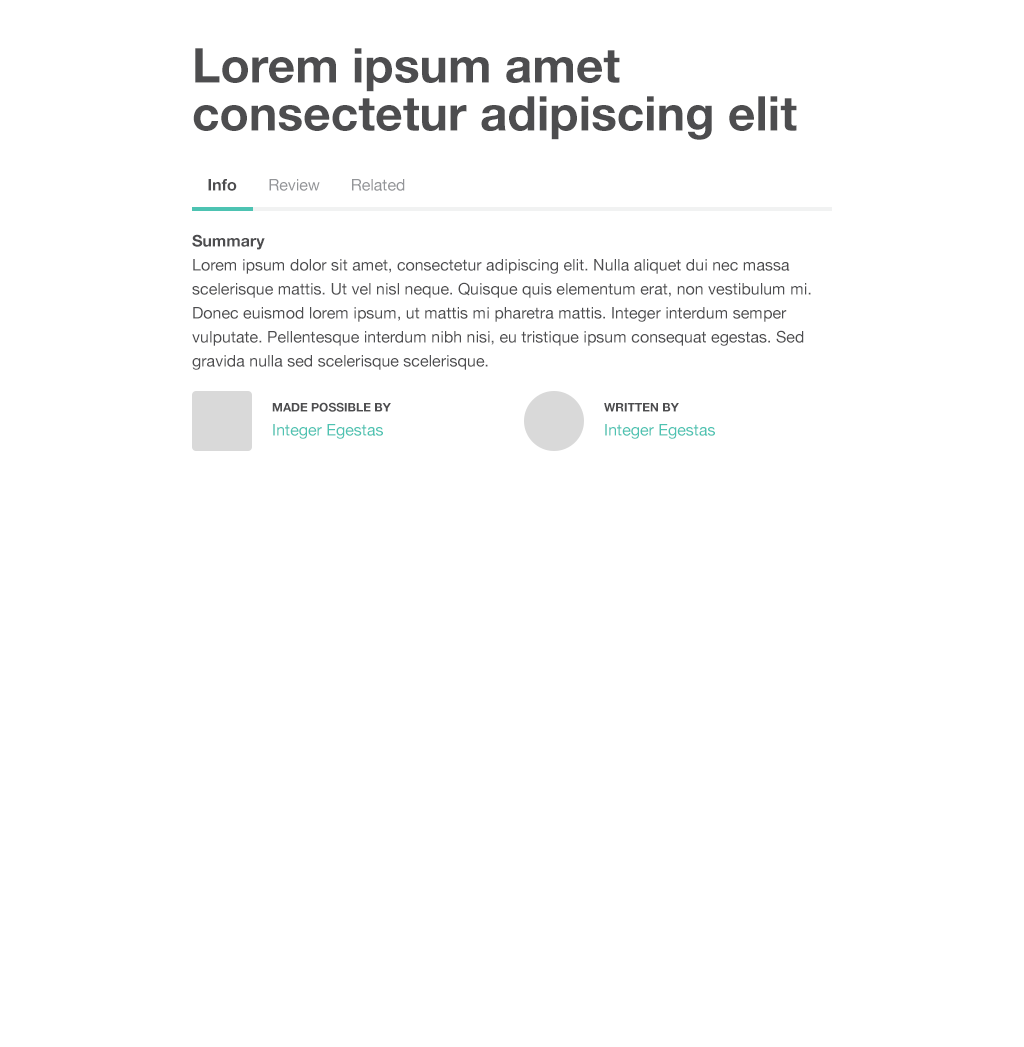
<style>
.page{position:relative;width:1024px;height:1047px;background:#ffffff}
.page>*{position:absolute;margin:0}
.t1{font:48px/48px "HelveticaNeue-Bold";color:#4d4d4f}
.t2{font:16px "HelveticaNeue-Bold";color:#4d4d4f}
.t3{font:16px "HelveticaNeue";color:#4d4d4f}
.t4{font:16px "HelveticaNeue-Bold"}
.t5{font:16px "HelveticaNeue";color:#939598}
.t6{font:16px/24px "HelveticaNeue";color:#4d4d4f}
.t7{font:12px "HelveticaNeue-Bold";color:#4d4d4f;text-transform:uppercase}
.t8{font:16px "HelveticaNeue";color:#4dc3b2}
</style>
<div class="page">
<p class="t1" style="left:193px;top:48px;width:604px;height:92px">Lorem ipsum amet consectetur adipiscing elit</p>
<p class="t2" style="left:208px;top:179px;width:29px;height:12px">Info</p>
<p class="t3" style="left:209px;top:179px;width:27px;height:12px">Info</p>
<p class="t3" style="left:209px;top:179px;width:27px;height:12px">Info</p>
<p class="t4" style="left:267px;top:179px;width:55px;height:12px">Review</p>
<p class="t5" style="left:269px;top:179px;width:51px;height:12px">Review</p>
<p class="t5" style="left:269px;top:179px;width:51px;height:12px">Review</p>
<p class="t5" style="left:352px;top:179px;width:53px;height:12px">Related</p>
<p class="t5" style="left:352px;top:179px;width:53px;height:12px">Related</p>
<p class="t2" style="left:192px;top:234px;width:73px;height:16px">Summary</p>
<p class="t6" style="left:192px;top:259px;width:619px;height:111px">Lorem ipsum dolor sit amet, consectetur adipiscing elit. Nulla aliquet dui nec massa scelerisque mattis. Ut vel nisl neque. Quisque quis elementum erat, non vestibulum mi. Donec euismod lorem ipsum, ut mattis mi pharetra mattis. Integer interdum semper vulputate. Pellentesque interdum nibh nisi, eu tristique ipsum consequat egestas. Sed gravida nulla sed scelerisque scelerisque.</p>
<p class="t7" style="left:272px;top:402px;width:119px;height:10px">Made Possible by</p>
<p class="t7" style="left:604px;top:403px;width:75px;height:9px">Written by</p>
<p class="t8" style="left:273px;top:424px;width:110px;height:15px">Integer Egestas</p>
<p class="t8" style="left:605px;top:424px;width:110px;height:15px">Integer Egestas</p>
</div>
